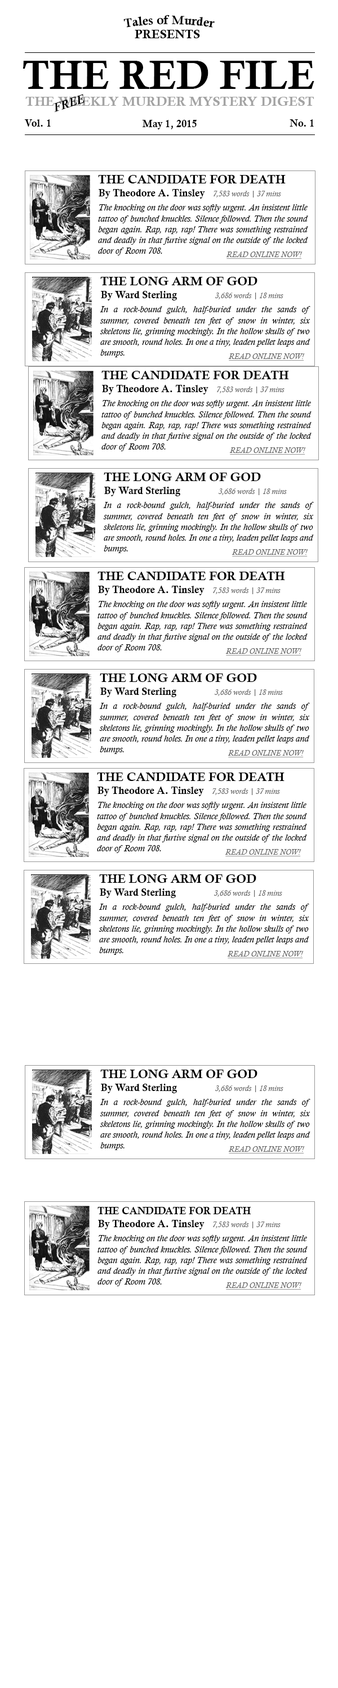
<style>
.page{position:relative;width:338px;height:1688px;background:#ffffff}
.page>*{position:absolute;margin:0}
.t1{font:12.4px "CalisMTBol";color:#000000}
.t2{font:40.5px "CalisMTBol";color:#000000;text-transform:uppercase}
.t3{font:13.5px "CalisMTBol";color:#a3a3a3;text-transform:uppercase}
.t4{font:12.4px "CalistoMT-BoldItalic";color:#000000;text-transform:uppercase}
.t5{font:10.1px "CalisMTBol";color:#000000}
.t6{font:7.9px "CalistoMT-Italic";color:#676767}
.t7{font:9px "CalistoMT-Italic";color:#000000}
.t8{font:7.9px "CalistoMT-Italic";color:#676767;text-decoration:underline}
</style>
<div class="page">
<p class="t1" style="left:123px;top:15px;width:91px;height:13px">Tales of Murder</p>
<p class="t1" style="left:134px;top:30px;width:66px;height:8px">PRESENTS</p>
<p class="t2" style="left:22px;top:61px;width:292px;height:28px">The RED File</p>
<p class="t3" style="left:25px;top:97px;width:289px;height:9px">The weekly murder mystery digest</p>
<p class="t4" style="left:54px;top:94px;width:30px;height:18px;rotate:-19deg">FREE</p>
<p class="t5" style="left:25px;top:119px;width:26px;height:8px">Vol. 1</p>
<p class="t5" style="left:142px;top:120px;width:54px;height:9px">May 1, 2015</p>
<p class="t5" style="left:289px;top:119px;width:24px;height:8px">No. 1</p>
<p class="t1" style="left:98px;top:175px;width:187px;height:8px">THE CANDIDATE FOR DEATH</p>
<p class="t5" style="left:98px;top:189px;width:107px;height:10px">By Theodore A. Tinsley</p>
<p class="t6" style="left:213px;top:191px;width:68px;height:6px">7,583 words | 37 mins</p>
<p class="t7" style="left:98px;top:204px;width:210px;height:51px;text-align:justify">The knocking on the door was softly urgent. An insistent little tattoo of bunched knuckles. Silence followed. Then the sound began again. Rap, rap, rap! There was something restrained and deadly in that furtive signal on the outside of the locked door of Room 708.</p>
<p class="t8" style="left:226px;top:251px;width:76px;height:8px">READ ONLINE NOW!</p>
<p class="t1" style="left:100px;top:277px;width:157px;height:8px">THE LONG ARM OF GOD</p>
<p class="t5" style="left:101px;top:291px;width:76px;height:9px">By Ward Sterling</p>
<p class="t6" style="left:214px;top:292px;width:69px;height:7px">3,686 words | 18 mins</p>
<p class="t7" style="left:100px;top:306px;width:210px;height:51px;text-align:justify">In a rock-bound gulch, half-buried under the sands of summer, covered beneath ten feet of snow in winter, six skeletons lie, grinning mockingly. In the hollow skulls of two are smooth, round holes. In one a tiny, leaden pellet leaps and bumps.</p>
<p class="t8" style="left:228px;top:353px;width:76px;height:8px">READ ONLINE NOW!</p>
<p class="t1" style="left:101px;top:371px;width:188px;height:8px">THE CANDIDATE FOR DEATH</p>
<p class="t5" style="left:102px;top:385px;width:106px;height:9px">By Theodore A. Tinsley</p>
<p class="t6" style="left:217px;top:386px;width:67px;height:7px">7,583 words | 37 mins</p>
<p class="t7" style="left:101px;top:400px;width:210px;height:51px;text-align:justify">The knocking on the door was softly urgent. An insistent little tattoo of bunched knuckles. Silence followed. Then the sound began again. Rap, rap, rap! There was something restrained and deadly in that furtive signal on the outside of the locked door of Room 708.</p>
<p class="t8" style="left:229px;top:447px;width:76px;height:7px">READ ONLINE NOW!</p>
<p class="t1" style="left:104px;top:472px;width:156px;height:9px">THE LONG ARM OF GOD</p>
<p class="t5" style="left:104px;top:487px;width:76px;height:9px">By Ward Sterling</p>
<p class="t6" style="left:218px;top:488px;width:68px;height:7px">3,686 words | 18 mins</p>
<p class="t7" style="left:103px;top:502px;width:210px;height:51px;text-align:justify">In a rock-bound gulch, half-buried under the sands of summer, covered beneath ten feet of snow in winter, six skeletons lie, grinning mockingly. In the hollow skulls of two are smooth, round holes. In one a tiny, leaden pellet leaps and bumps.</p>
<p class="t8" style="left:231px;top:549px;width:77px;height:7px">READ ONLINE NOW!</p>
<p class="t1" style="left:97px;top:572px;width:188px;height:8px">THE CANDIDATE FOR DEATH</p>
<p class="t5" style="left:98px;top:586px;width:106px;height:9px">By Theodore A. Tinsley</p>
<p class="t6" style="left:213px;top:587px;width:67px;height:7px">7,583 words | 37 mins</p>
<p class="t7" style="left:97px;top:601px;width:210px;height:51px;text-align:justify">The knocking on the door was softly urgent. An insistent little tattoo of bunched knuckles. Silence followed. Then the sound began again. Rap, rap, rap! There was something restrained and deadly in that furtive signal on the outside of the locked door of Room 708.</p>
<p class="t8" style="left:225px;top:648px;width:77px;height:7px">READ ONLINE NOW!</p>
<p class="t1" style="left:100px;top:673px;width:156px;height:9px">THE LONG ARM OF GOD</p>
<p class="t5" style="left:100px;top:687px;width:76px;height:10px">By Ward Sterling</p>
<p class="t6" style="left:214px;top:689px;width:68px;height:7px">3,686 words | 18 mins</p>
<p class="t7" style="left:99px;top:703px;width:210px;height:51px;text-align:justify">In a rock-bound gulch, half-buried under the sands of summer, covered beneath ten feet of snow in winter, six skeletons lie, grinning mockingly. In the hollow skulls of two are smooth, round holes. In one a tiny, leaden pellet leaps and bumps.</p>
<p class="t8" style="left:227px;top:750px;width:77px;height:7px">READ ONLINE NOW!</p>
<p class="t1" style="left:97px;top:772px;width:187px;height:9px">THE CANDIDATE FOR DEATH</p>
<p class="t5" style="left:97px;top:786px;width:107px;height:10px">By Theodore A. Tinsley</p>
<p class="t6" style="left:212px;top:788px;width:68px;height:7px">7,583 words | 37 mins</p>
<p class="t7" style="left:97px;top:802px;width:210px;height:51px;text-align:justify">The knocking on the door was softly urgent. An insistent little tattoo of bunched knuckles. Silence followed. Then the sound began again. Rap, rap, rap! There was something restrained and deadly in that furtive signal on the outside of the locked door of Room 708.</p>
<p class="t8" style="left:224px;top:849px;width:77px;height:7px">READ ONLINE NOW!</p>
<p class="t1" style="left:99px;top:874px;width:157px;height:9px">THE LONG ARM OF GOD</p>
<p class="t5" style="left:100px;top:888px;width:76px;height:10px">By Ward Sterling</p>
<p class="t6" style="left:213px;top:890px;width:69px;height:7px">3,686 words | 18 mins</p>
<p class="t7" style="left:98px;top:903px;width:211px;height:52px;text-align:justify">In a rock-bound gulch, half-buried under the sands of summer, covered beneath ten feet of snow in winter, six skeletons lie, grinning mockingly. In the hollow skulls of two are smooth, round holes. In one a tiny, leaden pellet leaps and bumps.</p>
<p class="t8" style="left:227px;top:951px;width:76px;height:7px">READ ONLINE NOW!</p>
<p class="t1" style="left:100px;top:1069px;width:157px;height:9px">THE LONG ARM OF GOD</p>
<p class="t5" style="left:101px;top:1083px;width:76px;height:10px">By Ward Sterling</p>
<p class="t6" style="left:214px;top:1085px;width:69px;height:7px">3,686 words | 18 mins</p>
<p class="t7" style="left:100px;top:1099px;width:210px;height:51px;text-align:justify">In a rock-bound gulch, half-buried under the sands of summer, covered beneath ten feet of snow in winter, six skeletons lie, grinning mockingly. In the hollow skulls of two are smooth, round holes. In one a tiny, leaden pellet leaps and bumps.</p>
<p class="t8" style="left:228px;top:1146px;width:76px;height:7px">READ ONLINE NOW!</p>
<p class="t5" style="left:97px;top:1207px;width:154px;height:7px">THE CANDIDATE FOR DEATH</p>
<p class="t5" style="left:98px;top:1220px;width:106px;height:9px">By Theodore A. Tinsley</p>
<p class="t6" style="left:213px;top:1221px;width:67px;height:7px">7,583 words | 37 mins</p>
<p class="t7" style="left:97px;top:1235px;width:210px;height:51px;text-align:justify">The knocking on the door was softly urgent. An insistent little tattoo of bunched knuckles. Silence followed. Then the sound began again. Rap, rap, rap! There was something restrained and deadly in that furtive signal on the outside of the locked door of Room 708.</p>
<p class="t8" style="left:225px;top:1282px;width:77px;height:7px">READ ONLINE NOW!</p>
</div>
